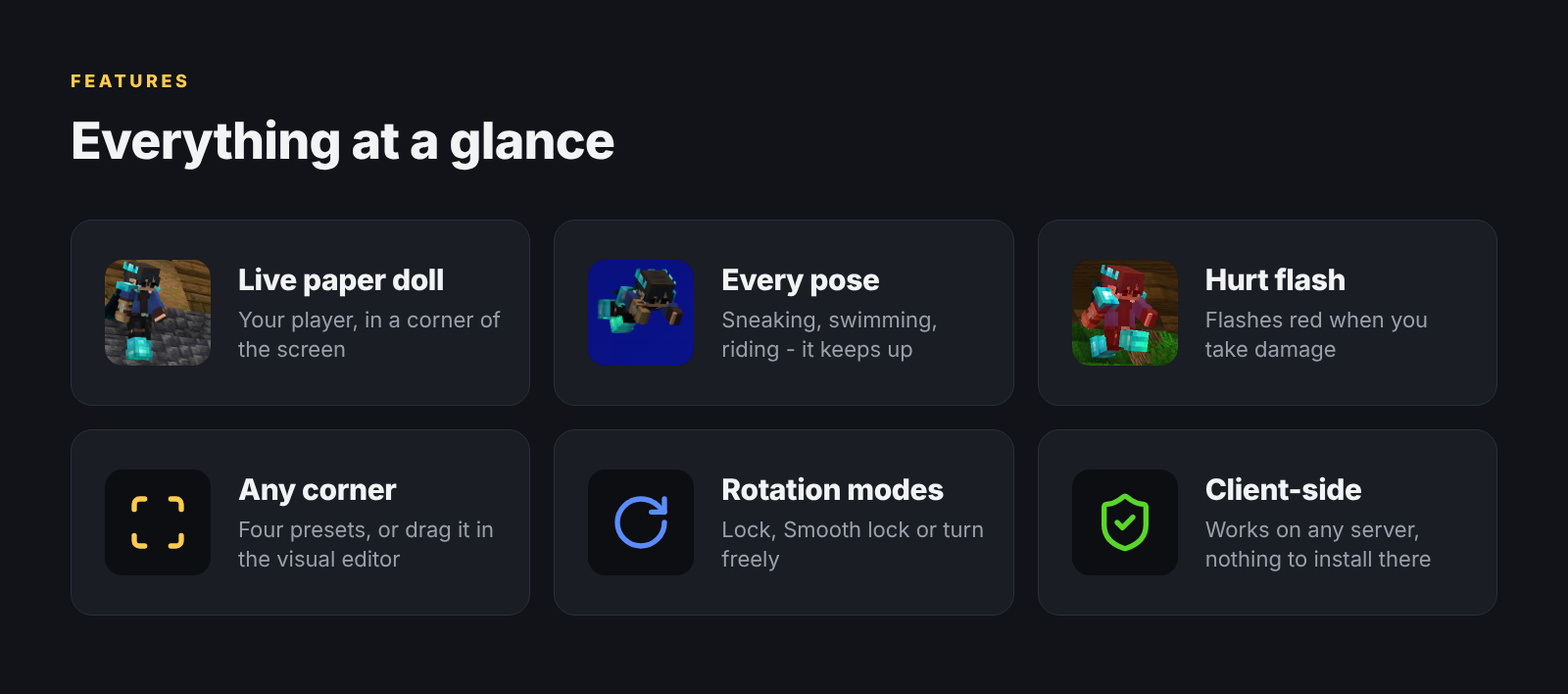
<style>
.page{position:relative;width:1568px;height:694px;background:#111318}
.page>*{position:absolute;margin:0}
.t1{font:17.6px "Inter-ExtraBold";letter-spacing:0.2em;color:#ffcc4d}
.t2{font:51px "Inter-ExtraBold";letter-spacing:-0.015em;color:#f2f3f5}
.t3{font:29.4px "Inter-ExtraBold";letter-spacing:-0.013em;color:#f2f3f5}
.t4{font:21.6px/29.4px "Inter-Regular";color:#9aa0ab}
</style>
<div class="page">
<p class="t1" style="left:72px;top:74px;width:115px;height:14px">FEATURES</p>
<p class="t2" style="left:73px;top:119px;width:541px;height:52px">Everything at a glance</p>
<p class="t3" style="left:239px;top:267px;width:204px;height:30px">Live paper doll</p>
<p class="t3" style="left:722px;top:269px;width:158px;height:28px">Every pose</p>
<p class="t3" style="left:1206px;top:268px;width:139px;height:23px">Hurt flash</p>
<p class="t4" style="left:238px;top:311px;width:263px;height:47px">Your player, in a corner of the screen</p>
<p class="t4" style="left:722px;top:311px;width:215px;height:51px">Sneaking, swimming, riding - it keeps up</p>
<p class="t4" style="left:1204px;top:312px;width:223px;height:50px">Flashes red when you take damage</p>
<p class="t3" style="left:238px;top:478px;width:159px;height:29px">Any corner</p>
<p class="t3" style="left:722px;top:476px;width:222px;height:25px">Rotation modes</p>
<p class="t3" style="left:1205px;top:476px;width:157px;height:25px">Client-side</p>
<p class="t4" style="left:238px;top:520px;width:255px;height:47px">Four presets, or drag it in the visual editor</p>
<p class="t4" style="left:721px;top:520px;width:262px;height:51px">Lock, Smooth lock or turn freely</p>
<p class="t4" style="left:1205px;top:521px;width:226px;height:50px">Works on any server, nothing to install there</p>
</div>
